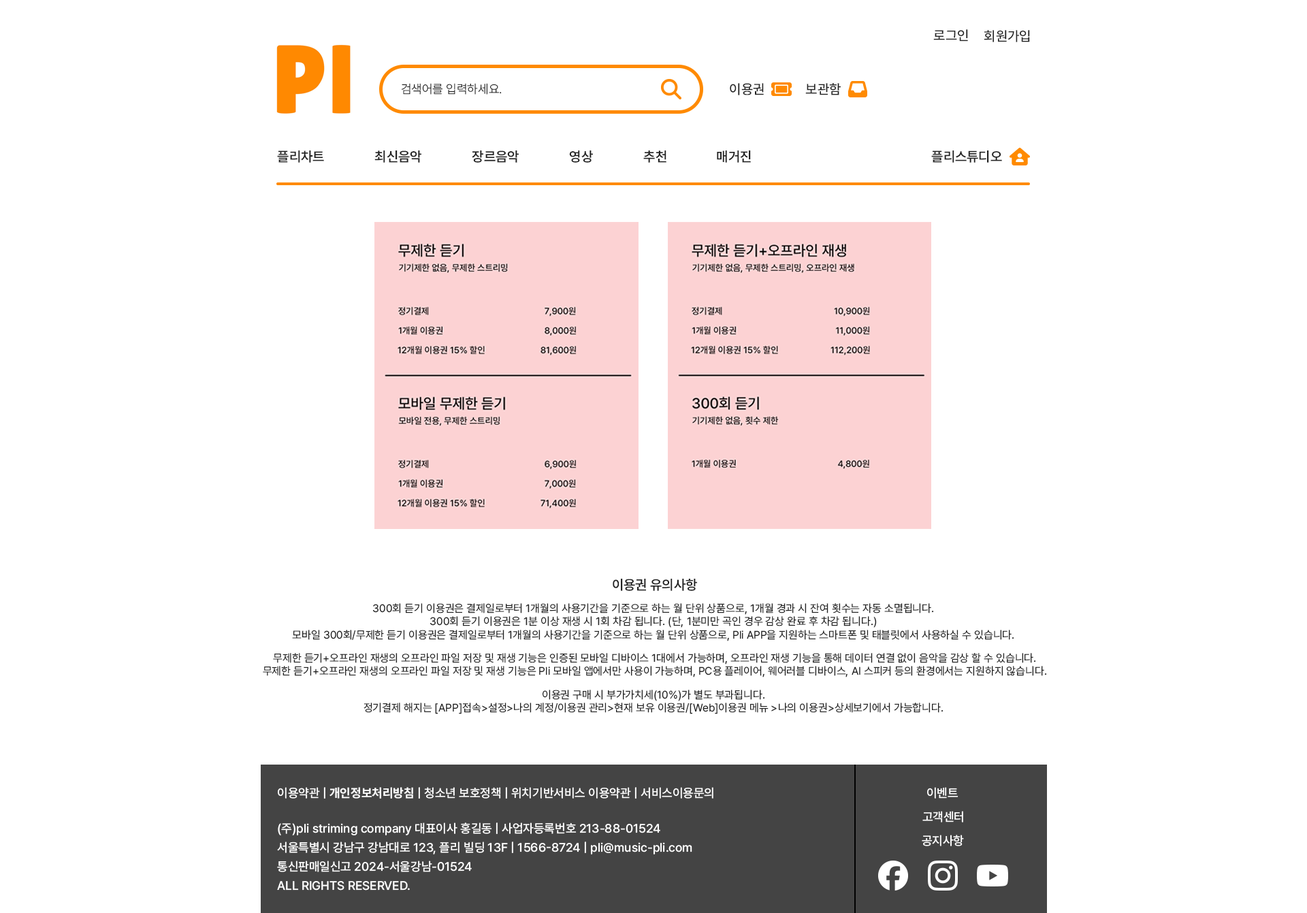
<style>
.page{position:relative;width:1307px;height:913px;background:#ffffff}
.page>*{position:absolute;margin:0}
.t1{font:13.6px "Pretendard-Medium";color:#222222}
.t2{font:12.2px "Pretendard-Light";color:#222222}
.t3{font:13.6px "Pretendard-SemiBold";color:#222222}
.t4{font:10.9px "Pretendard-Regular";color:#222222}
.t5{font:12.2px "Pretendard-Medium";color:#ffffff}
.t6{font:12.2px "Pretendard-Bold";color:#ffffff}
.t7{font:12.2px/19.1px "Pretendard-Medium";color:#ffffff}
</style>
<div class="page">
<p class="t1" style="left:933px;top:29px;width:35px;height:13px">로그인</p>
<p class="t1" style="left:983px;top:30px;width:47px;height:12px">회원가입</p>
<p class="t2" style="left:401px;top:83px;width:101px;height:12px">검색어를 입력하세요.</p>
<p class="t1" style="left:730px;top:83px;width:34px;height:12px">이용권</p>
<p class="t1" style="left:805px;top:83px;width:35px;height:12px">보관함</p>
<p class="t3" style="left:277px;top:150px;width:47px;height:13px">플리차트</p>
<p class="t3" style="left:374px;top:150px;width:47px;height:13px">최신음악</p>
<p class="t3" style="left:472px;top:150px;width:47px;height:13px">장르음악</p>
<p class="t3" style="left:569px;top:150px;width:24px;height:13px">영상</p>
<p class="t3" style="left:643px;top:150px;width:23px;height:13px">추천</p>
<p class="t3" style="left:717px;top:150px;width:34px;height:13px">매거진</p>
<p class="t3" style="left:931px;top:150px;width:71px;height:13px">플리스튜디오</p>
<p class="t3" style="left:612px;top:578px;width:85px;height:13px">이용권 유의사항</p>
<p class="t4" style="left:292px;top:603px;width:722px;height:38px;text-align:center">300회 듣기 이용권은 결제일로부터 1개월의 사용기간을 기준으로 하는 월 단위 상품으로, 1개월 경과 시 잔여 횟수는 자동 소멸됩니다.<br>300회 듣기 이용권은 1분 이상 재생 시 1회 차감 됩니다. (단, 1분미만 곡인 경우 감상 완료 후 차감 됩니다.)<br>모바일 300회/무제한 듣기 이용권은 결제일로부터 1개월의 사용기간을 기준으로 하는 월 단위 상품으로, Pli APP을 지원하는 스마트폰 및 태블릿에서 사용하실 수 있습니다.</p>
<p class="t4" style="left:263px;top:653px;width:784px;height:24px;text-align:center">무제한 듣기+오프라인 재생의 오프라인 파일 저장 및 재생 기능은 인증된 모바일 디바이스 1대에서 가능하며, 오프라인 재생 기능을 통해 데이터 연결 없이 음악을 감상 할 수 있습니다.<br>무제한 듣기+오프라인 재생의 오프라인 파일 저장 및 재생 기능은 Pli 모바일 앱에서만 사용이 가능하며, PC용 플레이어, 웨어러블 디바이스, AI 스피커 등의 환경에서는 지원하지 않습니다.</p>
<p class="t4" style="left:363px;top:689px;width:580px;height:25px;text-align:center">이용권 구매 시 부가가치세(10%)가 별도 부과됩니다.<br>정기결제 해지는 [APP]접속&gt;설정&gt;나의 계정/이용권 관리&gt;현재 보유 이용권/[Web]이용권 메뉴 &gt;나의 이용권&gt;상세보기에서 가능합니다.</p>
<p class="t5" style="left:278px;top:787px;width:435px;height:11px">이용약관 | <span class="t6">개인정보처리방침</span> | 청소년 보호정책 | 위치기반서비스 이용약관 | 서비스이용문의</p>
<p class="t5" style="left:927px;top:787px;width:31px;height:11px">이벤트</p>
<p class="t5" style="left:922px;top:811px;width:41px;height:11px">고객센터</p>
<p class="t7" style="left:277px;top:822px;width:415px;height:68px">(주)pli striming company 대표이사 홍길동 | 사업자등록번호 213-88-01524<br>서울특별시 강남구 강남대로 123, 플리 빌딩 13F | 1566-8724 | pli@music-pli.com<br>통신판매일신고 2024-서울강남-01524      <br>ALL RIGHTS RESERVED.</p>
<p class="t5" style="left:921px;top:834px;width:43px;height:12px">공지사항</p>
</div>
